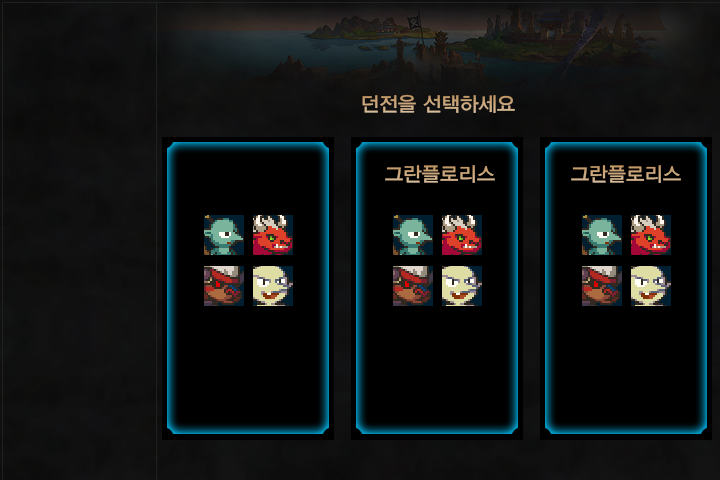
<style>
.page{position:relative;width:720px;height:480px;background:#000000}
.page>*{position:absolute;margin:0}
.t1{font:20px "YDIYGO330";color:#cba87f}
</style>
<div class="page">
<p class="t1" style="left:362px;top:94px;width:153px;height:19px">던전을 선택하세요</p>
<p class="t1" style="left:385px;top:165px;width:110px;height:18px">그란플로리스</p>
<p class="t1" style="left:571px;top:165px;width:110px;height:18px">그란플로리스</p>
</div>
